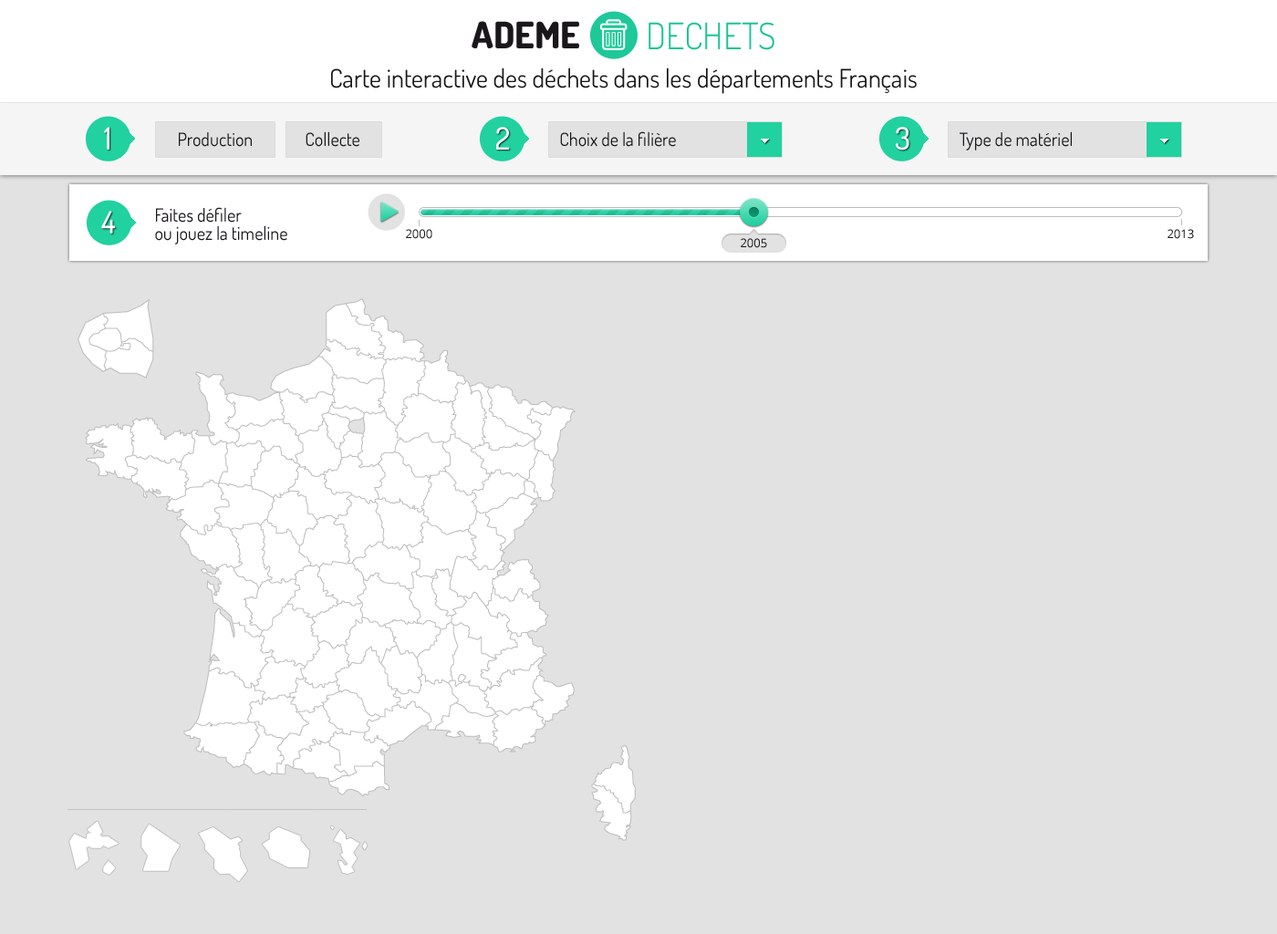
<style>
.page{position:relative;width:1277px;height:934px;background:#e2e2e2}
.page>*{position:absolute;margin:0}
.t1{font:36.5px "Dosis-ExtraBold";color:#1a171b}
.t2{font:36.5px "Dosis-Light";color:#17c495}
.t3{font:25.5px "Dosis-Regular";color:#1a171b}
.t4{font:31px "Dosis-Medium";color:#ffffff}
.t5{font:18.2px "Dosis-Regular";color:#1a171b}
.t6{font:18.2px/12.8px "Dosis-Regular";color:#1a171b}
.t7{font:11.9px "OpenSans";color:#1a171b}
</style>
<div class="page">
<p class="t1" style="left:472px;top:21px;width:107px;height:27px">ADEME</p>
<p class="t2" style="left:648px;top:22px;width:126px;height:28px">DECHETS</p>
<p class="t3" style="left:331px;top:67px;width:586px;height:27px">Carte interactive des déchets dans les départements Français</p>
<p class="t4" style="left:104px;top:127px;width:5px;height:23px">1</p>
<p class="t5" style="left:179px;top:132px;width:73px;height:15px">Production</p>
<p class="t5" style="left:306px;top:131px;width:53px;height:16px">Collecte</p>
<p class="t4" style="left:496px;top:127px;width:14px;height:23px">2</p>
<p class="t5" style="left:560px;top:131px;width:116px;height:16px">Choix de la filière</p>
<p class="t4" style="left:896px;top:127px;width:13px;height:23px">3</p>
<p class="t5" style="left:959px;top:131px;width:113px;height:19px">Type de matériel</p>
<p class="t6" style="left:155px;top:207px;width:132px;height:37px">Faites défiler<br>ou jouez la timeline</p>
<p class="t4" style="left:101px;top:211px;width:15px;height:22px">4</p>
<p class="t7" style="left:406px;top:229px;width:26px;height:10px">2000</p>
<p class="t7" style="left:1167px;top:229px;width:27px;height:10px">2013</p>
<p class="t7" style="left:741px;top:238px;width:26px;height:10px">2005</p>
</div>
